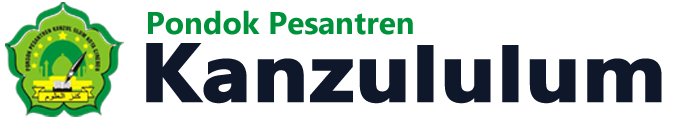
<style>
.page{position:relative;width:682px;height:127px;background:#ffffff}
.page>*{position:absolute;margin:0}
.t1{font:31.4px "Ebrima-Bold";color:#00923a}
.t2{font:81.3px "Ebrima-Bold";color:#0f172a;font-weight:bold;scale:1.11 1}
.t3{font:81.3px "Ebrima-Bold";color:#0f172a;font-weight:bold;scale:1.13 1}
.t4{font:74.2px "Ebrima-Bold";color:#0f172a;font-weight:bold;scale:1.21 1}
</style>
<div class="page">
<p class="t1" style="left:148px;top:10px;width:265px;height:25px">Pondok Pesantren</p>
<p class="t2" style="left:146px;top:43px;width:516px;height:61px"><span class="t3">K</span>anzu<span class="t4">l</span>u<span class="t4">l</span>um</p>
</div>
